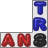
<style>
.page{position:relative;width:48px;height:48px;background:#ffffff}
.page>*{position:absolute;margin:0}
.t1{font:15.4px "Calibri";scale:1.27 1}
.t2{font:15.4px "Calibri";scale:1.56 1}
.t3{font:15.4px "Calibri";scale:1.17 1}
.t4{font:15.4px "Calibri";scale:1.25 1}
</style>
<div class="page">
<p class="t1" style="left:35px;top:3px;width:10px;height:11px">T</p>
<p class="t2" style="left:34px;top:19px;width:11px;height:11px">R</p>
<p class="t3" style="left:3px;top:35px;width:10px;height:11px">A</p>
<p class="t4" style="left:19px;top:35px;width:10px;height:11px">N</p>
</div>
